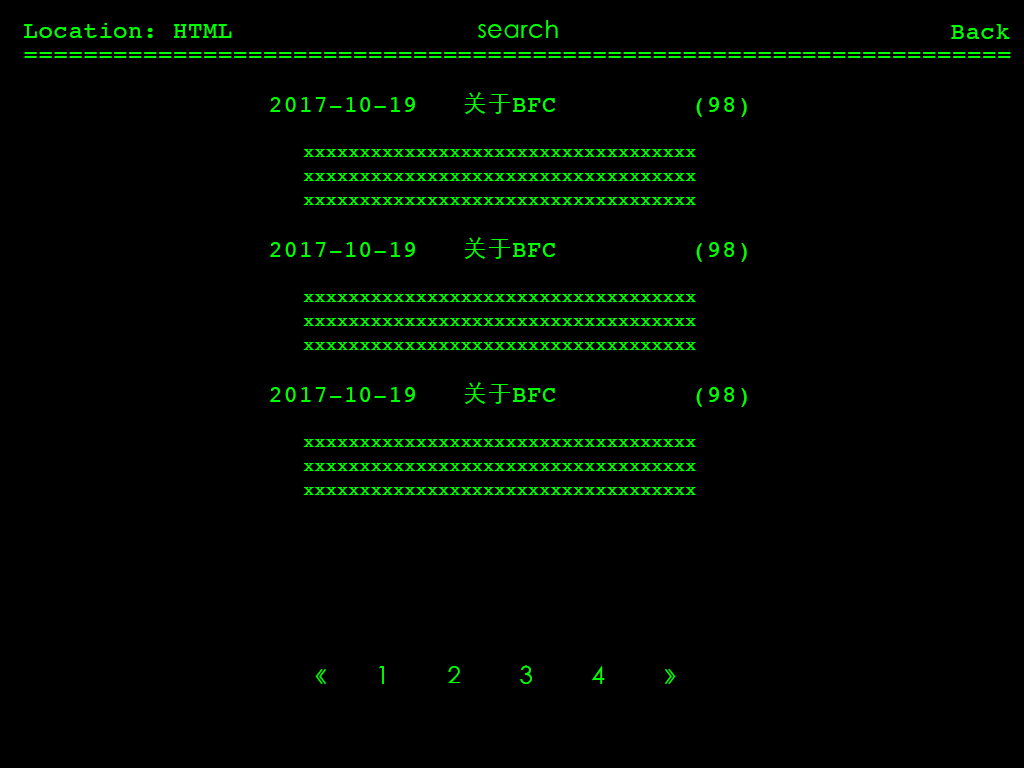
<style>
.page{position:relative;width:1024px;height:768px;background:#000000}
.page>*{position:absolute;margin:0}
.t1{font:24px/24px "Courier";letter-spacing:0.024em;color:#00ff00}
.t2{font:24px "STHeitiSC-Light";letter-spacing:0.024em;color:#00ff00}
.t3{font:24px "Courier";letter-spacing:0.024em;color:#00ff00}
.t4{font:18px/24px "Courier";letter-spacing:0.024em;color:#00ff00}
</style>
<div class="page">
<p class="t1" style="left:24px;top:23px;width:987px;height:35px">Location: HTML<br>==================================================================</p>
<p class="t2" style="left:478px;top:20px;width:80px;height:19px">search</p>
<p class="t3" style="left:951px;top:24px;width:59px;height:15px">Back</p>
<p class="t3" style="left:270px;top:92px;width:477px;height:25px">2017-10-19   <span class="t2">关于</span>BFC         (98)</p>
<p class="t4" style="left:303px;top:149px;width:393px;height:56px">xxxxxxxxxxxxxxxxxxxxxxxxxxxxxxxxxxx<br>xxxxxxxxxxxxxxxxxxxxxxxxxxxxxxxxxxx<br>xxxxxxxxxxxxxxxxxxxxxxxxxxxxxxxxxxx</p>
<p class="t3" style="left:270px;top:237px;width:477px;height:25px">2017-10-19   <span class="t2">关于</span>BFC         (98)</p>
<p class="t4" style="left:303px;top:294px;width:393px;height:56px">xxxxxxxxxxxxxxxxxxxxxxxxxxxxxxxxxxx<br>xxxxxxxxxxxxxxxxxxxxxxxxxxxxxxxxxxx<br>xxxxxxxxxxxxxxxxxxxxxxxxxxxxxxxxxxx</p>
<p class="t3" style="left:270px;top:382px;width:477px;height:25px">2017-10-19   <span class="t2">关于</span>BFC         (98)</p>
<p class="t4" style="left:303px;top:439px;width:393px;height:56px">xxxxxxxxxxxxxxxxxxxxxxxxxxxxxxxxxxx<br>xxxxxxxxxxxxxxxxxxxxxxxxxxxxxxxxxxx<br>xxxxxxxxxxxxxxxxxxxxxxxxxxxxxxxxxxx</p>
<p class="t2" style="left:315px;top:665px;width:361px;height:19px">《   1  2  3  4  》</p>
</div>
